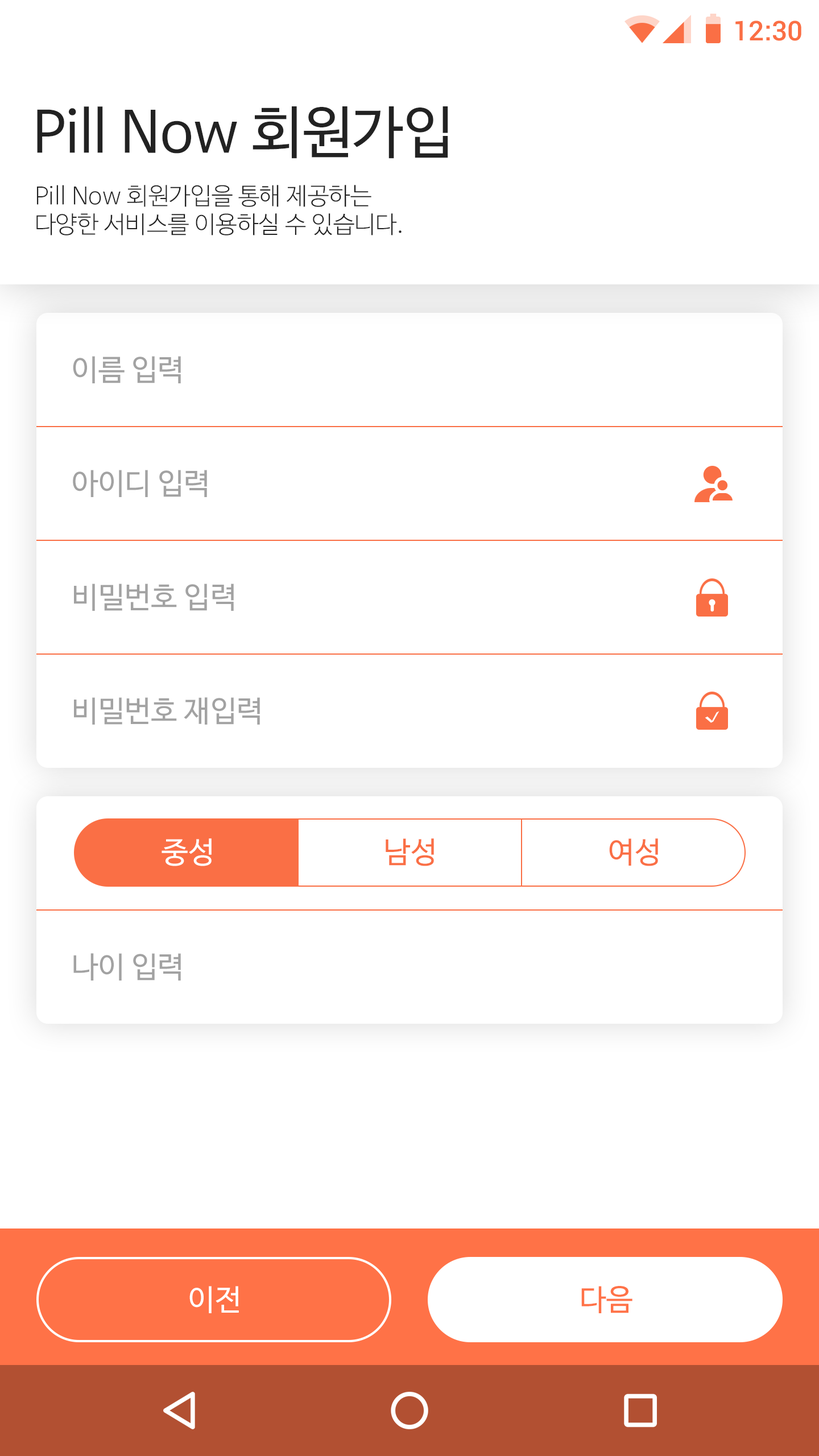
<style>
.page{position:relative;width:819px;height:1456px;background:#ffffff}
.page>*{position:absolute;margin:0}
.t1{font:27.3px "Roboto-Medium";color:#fa6f45}
.t2{font:56.9px "NanumBarunGothic";color:#222222}
.t3{font:23.9px "NanumBarunGothicLight";color:#222222}
.t4{font:29.6px "NanumBarunGothic";color:#a2a2a2}
.t5{font:14.2px "NanumBarunGothic";color:#ffffff;scale:2.17 1}
.t6{font:29.6px "NanumBarunGothic";color:#ffffff}
.t7{font:29.6px "NanumBarunGothic";color:#fa6f45}
.t8{font:29.6px "NanumBarunGothic";color:#ff7247}
</style>
<div class="page">
<p class="t1" style="left:735px;top:20px;width:66px;height:21px">12:30</p>
<p class="t2" style="left:37px;top:106px;width:411px;height:53px">Pill Now 회원가입</p>
<p class="t3" style="left:36px;top:185px;width:366px;height:50px">Pill Now 회원가입을 통해 제공하는<br>다양한 서비스를 이용하실 수 있습니다.</p>
<p class="t4" style="left:73px;top:356px;width:108px;height:27px">이름 입력</p>
<p class="t4" style="left:73px;top:470px;width:134px;height:27px">아이디 입력</p>
<p class="t4" style="left:74px;top:584px;width:160px;height:27px">비밀번호 입력</p>
<p class="t4" style="left:74px;top:697px;width:186px;height:28px">비밀번호 재입력</p>
<p class="t5" style="left:705px;top:711px;width:14px;height:12px;rotate:-25deg">v</p>
<p class="t6" style="left:162px;top:838px;width:50px;height:28px">중성</p>
<p class="t7" style="left:386px;top:838px;width:48px;height:28px">남성</p>
<p class="t7" style="left:609px;top:838px;width:49px;height:28px">여성</p>
<p class="t4" style="left:73px;top:953px;width:108px;height:28px">나이 입력</p>
<p class="t6" style="left:189px;top:1286px;width:50px;height:27px">이전</p>
<p class="t8" style="left:581px;top:1286px;width:51px;height:27px">다음</p>
</div>
